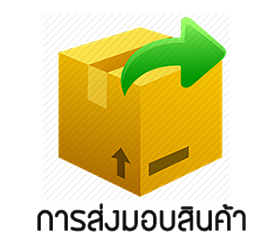
<style>
.page{position:relative;width:280px;height:245px;background:#ffffff}
.page>*{position:absolute;margin:0}
.t1{font:30px "BangnaNew";color:#020200}
</style>
<div class="page">
<p class="t1" style="left:38px;top:204px;width:207px;height:27px">การส่งมอบสินค้า</p>
</div>
